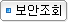
<style>
.page{position:relative;width:68px;height:22px;background:#ffffff}
.page>*{position:absolute;margin:0}
.t1{font:12px "GulimChe";color:#000000}
</style>
<div class="page">
<p class="t1" style="left:16px;top:5px;width:45px;height:11px">보안조회</p>
</div>
